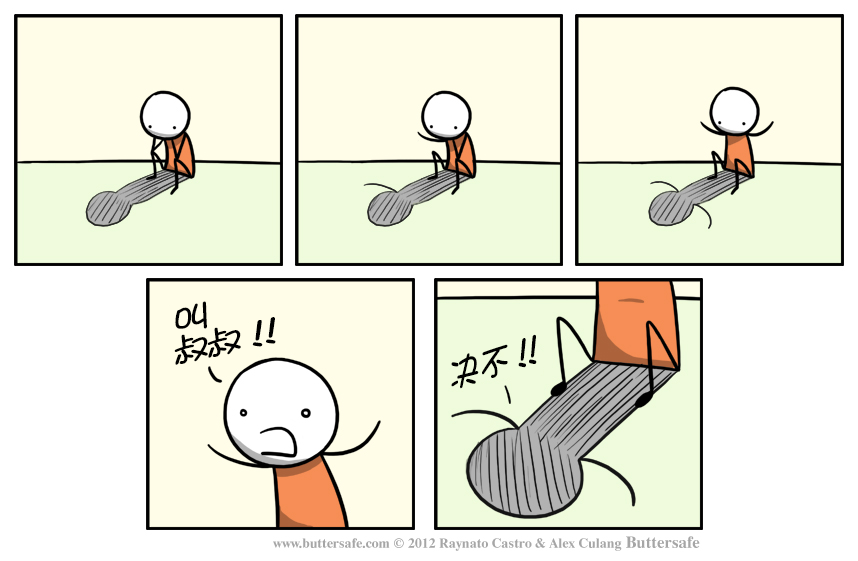
<style>
.page{position:relative;width:858px;height:561px;background:#ffffff}
.page>*{position:absolute;margin:0}
.t1{font:33.3px/30.3px "DFShaoNvW5";letter-spacing:-0.16em;color:#000000;font-weight:bold;scale:1.17 1}
.t2{font:33.3px/30.3px "DFShaoNvW5";letter-spacing:-0.68em;color:#000000;font-weight:bold;scale:1.17 1}
.t3{font:36.6px "DFShaoNvW5";letter-spacing:-0.68em;color:#000000;font-weight:bold;scale:0.85 1}
.t4{font:36.6px "DFShaoNvW5";letter-spacing:-0.02em;color:#000000;font-weight:bold;scale:0.85 1}
.t5{font:36.6px "DFShaoNvW5";letter-spacing:-0.1em;color:#000000;font-weight:bold;scale:0.85 1}
</style>
<div class="page">
<p class="t1" style="left:174px;top:301px;width:102px;height:64px;rotate:-12deg">叫<br>叔叔<span class="t2">！！</span></p>
<p class="t3" style="left:451px;top:334px;width:86px;height:55px;rotate:-17deg"><span class="t4">决</span><span class="t5">不</span>！！</p>
</div>
